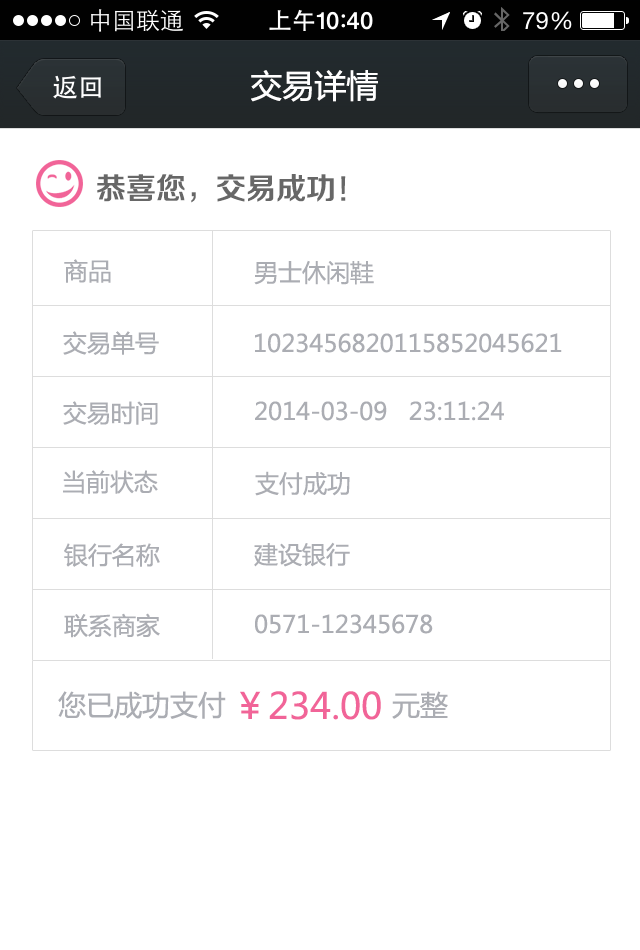
<style>
.page{position:relative;width:640px;height:950px;background:#ffffff}
.page>*{position:absolute;margin:0}
.t1{font:32px "MicrosoftYaHei";color:#ffffff}
.t2{font:30px "FZZZHONGJW--GB1-0";color:#676767}
.t3{font:24px "MicrosoftYaHei";color:#abadb3}
.t4{font:28px "MicrosoftYaHei";color:#abadb3}
.t5{font:36px "MicrosoftYaHei";color:#f16498}
</style>
<div class="page">
<p class="t1" style="left:251px;top:70px;width:127px;height:32px">交易详情</p>
<p class="t2" style="left:97px;top:174px;width:249px;height:29px">恭喜您，交易成功！</p>
<p class="t3" style="left:64px;top:259px;width:47px;height:24px">商品</p>
<p class="t3" style="left:254px;top:260px;width:120px;height:25px">男士休闲鞋</p>
<p class="t3" style="left:63px;top:331px;width:96px;height:24px">交易单号</p>
<p class="t3" style="left:255px;top:333px;width:307px;height:20px">1023456820115852045621</p>
<p class="t3" style="left:63px;top:401px;width:95px;height:24px">交易时间</p>
<p class="t3" style="left:255px;top:401px;width:249px;height:20px">2014-03-09   23:11:24</p>
<p class="t3" style="left:63px;top:470px;width:95px;height:24px">当前状态</p>
<p class="t3" style="left:255px;top:471px;width:95px;height:25px">支付成功</p>
<p class="t3" style="left:64px;top:543px;width:96px;height:24px">银行名称</p>
<p class="t3" style="left:254px;top:542px;width:96px;height:25px">建设银行</p>
<p class="t3" style="left:64px;top:613px;width:96px;height:25px">联系商家</p>
<p class="t3" style="left:255px;top:614px;width:178px;height:20px">0571-12345678</p>
<p class="t4" style="left:58px;top:691px;width:168px;height:28px">您已成功支付</p>
<p class="t5" style="left:240px;top:691px;width:141px;height:29px">￥234.00</p>
<p class="t4" style="left:392px;top:691px;width:56px;height:28px">元整</p>
</div>
